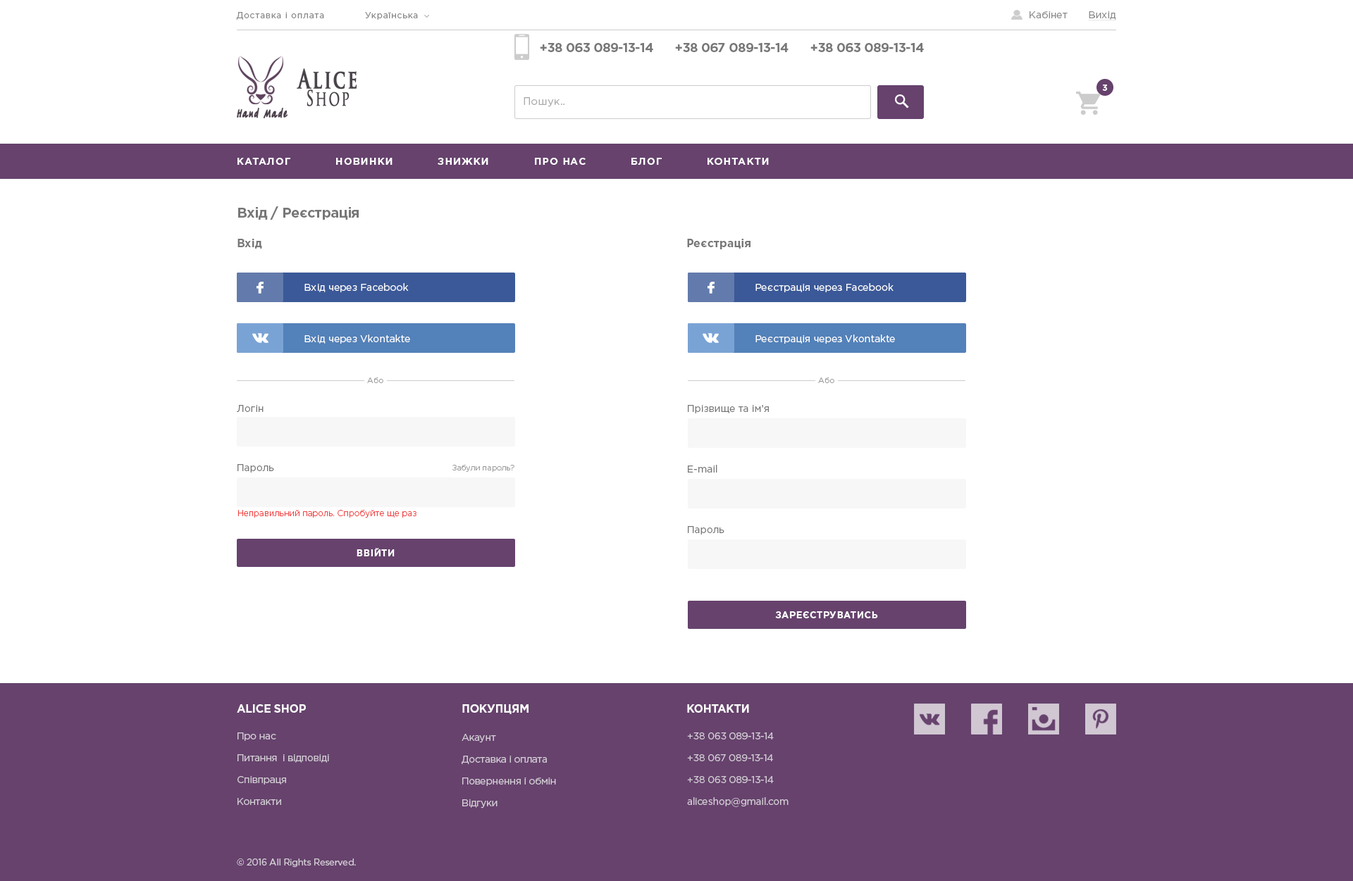
<style>
.page{position:relative;width:1353px;height:881px;background:#ffffff}
.page>*{position:absolute;margin:0}
.t1{font:8.5px "GothamPro";letter-spacing:0.075em;color:#888888}
.t2{font:9.9px "GothamPro";color:#888888}
.t3{font:9.9px "GothamPro";color:#888888;text-decoration:underline}
.t4{font:12.7px/17.6px "GothamPro-Bold";letter-spacing:-0.025em;color:#777777}
.t5{font:12.7px/17.6px "GothamPro";letter-spacing:-0.025em;color:#777777}
.t6{font:25.9px/17.3px "TrajanPro-Bold";letter-spacing:0.1em;color:#494249;font-weight:bold;scale:0.67 1}
.t7{font:20.7px/17.3px "TrajanPro-Regular";letter-spacing:0.1em;color:#494249;font-weight:bold;scale:0.67 1}
.t8{font:8.5px "GothamPro-Bold";letter-spacing:0.01em;color:#ffffff;text-transform:uppercase}
.t9{font:10.6px "GothamPro";letter-spacing:0.01em;color:#aaaaaa}
.t10{font:12px "TagirCTT";letter-spacing:0.1em;color:#463c45;font-weight:bold;scale:0.65 1}
.t11{font:9.9px "GothamPro-Bold";letter-spacing:0.075em;color:#ffffff;text-transform:uppercase}
.t12{font:14.1px "GothamPro-Bold";letter-spacing:-0.025em;color:#777777}
.t13{font:11.3px "GothamPro-Bold";color:#777777}
.t14{font:9.9px "GothamPro";color:#ffffff}
.t15{font:7.8px "GothamPro-Light";color:#999999}
.t16{font:9.9px "GothamPro";color:#777777}
.t17{font:8.5px "GothamPro-Light";color:#f04242}
.t18{font:9.2px "GothamPro-Bold";letter-spacing:0.05em;color:#ffffff;text-transform:uppercase}
.t19{font:11.3px "GothamPro-Bold";letter-spacing:-0.025em;color:#fafafa;text-transform:uppercase}
.t20{font:9.9px/14.8px "GothamPro";letter-spacing:-0.025em;color:#d4ced6}
.t21{font:9.2px "GothamPro";letter-spacing:-0.025em;color:#d4ced6}
</style>
<div class="page">
<p class="t1" style="left:236px;top:12px;width:88px;height:8px">Доставка і оплата</p>
<p class="t1" style="left:365px;top:12px;width:53px;height:8px">Українська</p>
<p class="t2" style="left:1029px;top:11px;width:38px;height:7px">Кабінет</p>
<p class="t3" style="left:1088px;top:11px;width:28px;height:9px">Вихід</p>
<p class="t4" style="left:540px;top:43px;width:113px;height:9px">+38 063 089-13-14<span class="t5"> <br>е</span></p>
<p class="t4" style="left:675px;top:43px;width:113px;height:9px">+38 067 089-13-14<span class="t5"> <br>е</span></p>
<p class="t4" style="left:810px;top:43px;width:114px;height:9px">+38 063 089-13-14<span class="t5"> <br>е</span></p>
<p class="t6" style="left:297px;top:68px;width:60px;height:38px">Alice<br> <span class="t7">Shop</span></p>
<p class="t8" style="left:1102px;top:85px;width:6px;height:6px">3</p>
<p class="t9" style="left:524px;top:97px;width:40px;height:10px">Пошук..</p>
<p class="t10" style="left:237px;top:108px;width:50px;height:10px">Hand Made</p>
<p class="t11" style="left:237px;top:158px;width:53px;height:7px">каталог</p>
<p class="t11" style="left:336px;top:158px;width:56px;height:7px">Новинки</p>
<p class="t11" style="left:438px;top:158px;width:50px;height:7px">Знижки</p>
<p class="t11" style="left:535px;top:158px;width:51px;height:7px">Про нас</p>
<p class="t11" style="left:631px;top:158px;width:31px;height:7px">Блог</p>
<p class="t11" style="left:707px;top:158px;width:62px;height:7px">Контакти</p>
<p class="t12" style="left:238px;top:206px;width:121px;height:14px">Вхід / Реєстрація</p>
<p class="t13" style="left:237px;top:239px;width:25px;height:10px">Вхід</p>
<p class="t13" style="left:687px;top:239px;width:63px;height:10px">Реєстрація</p>
<p class="t14" style="left:304px;top:283px;width:105px;height:9px">Вхід через Facebook</p>
<p class="t14" style="left:755px;top:283px;width:138px;height:9px">Реєстрація через Facebook</p>
<p class="t14" style="left:304px;top:335px;width:106px;height:9px">Вхід через Vkontakte</p>
<p class="t14" style="left:755px;top:335px;width:140px;height:9px">Реєстрація через Vkontakte</p>
<p class="t15" style="left:367px;top:378px;width:16px;height:5px">Або</p>
<p class="t15" style="left:818px;top:378px;width:16px;height:5px">Або</p>
<p class="t16" style="left:237px;top:405px;width:27px;height:7px">Логін</p>
<p class="t16" style="left:688px;top:405px;width:81px;height:9px">Прізвище та ім’я</p>
<p class="t16" style="left:237px;top:464px;width:37px;height:9px">Пароль</p>
<p class="t15" style="left:452px;top:465px;width:62px;height:7px">Забули пароль?</p>
<p class="t16" style="left:688px;top:465px;width:29px;height:8px">E-mail</p>
<p class="t17" style="left:237px;top:510px;width:179px;height:8px">Неправильний пароль. Спробуйте ще раз</p>
<p class="t16" style="left:688px;top:526px;width:36px;height:9px">Пароль</p>
<p class="t18" style="left:357px;top:548px;width:38px;height:9px">Ввійти</p>
<p class="t18" style="left:775px;top:612px;width:103px;height:7px">Зареєструватись</p>
<p class="t19" style="left:237px;top:705px;width:69px;height:8px">Alice Shop</p>
<p class="t19" style="left:462px;top:705px;width:66px;height:9px">Покупцям</p>
<p class="t19" style="left:687px;top:705px;width:62px;height:8px">Контакти</p>
<p class="t20" style="left:237px;top:733px;width:92px;height:72px">Про нас<br>Питання  і відповіді<br>Співпраця<br>Контакти</p>
<p class="t20" style="left:462px;top:734px;width:94px;height:75px">Акаунт<br>Доставка і оплата<br>Повернення і обмін<br>Відгуки</p>
<p class="t20" style="left:687px;top:733px;width:101px;height:74px">+38 063 089-13-14 <br>+38 067 089-13-14 <br>+38 063 089-13-14 <br>aliceshop@gmail.com</p>
<p class="t21" style="left:237px;top:859px;width:119px;height:9px">© 2016 All Rights Reserved.</p>
</div>
